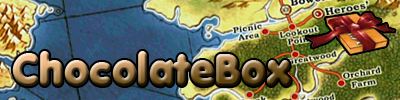
<style>
.page{position:relative;width:400px;height:100px}
.page>*{position:absolute;margin:0}
.t1{font:44.9px "Debussy";letter-spacing:0.01em;scale:0.89 1}
</style>
<div class="page">
<p class="t1" style="left:12px;top:51px;width:279px;height:36px">ChocolateBox</p>
</div>
